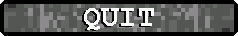
<style>
.page{position:relative;width:238px;height:36px;background:#545654}
.page>*{position:absolute;margin:0}
.t1{font:30px "CourierNewPS-BoldMT";color:#ffffff}
</style>
<div class="page">
<p class="t1" style="left:84px;top:8px;width:70px;height:22px">QUIT</p>
</div>
